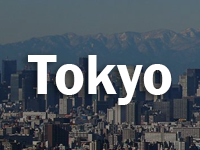
<style>
.page{position:relative;width:200px;height:150px}
.page>*{position:absolute;margin:0}
.t1{font:58.3px "FranklinGothic-Demi";color:#ffffff}
</style>
<div class="page">
<p class="t1" style="left:28px;top:55px;width:144px;height:50px">Tokyo</p>
</div>
